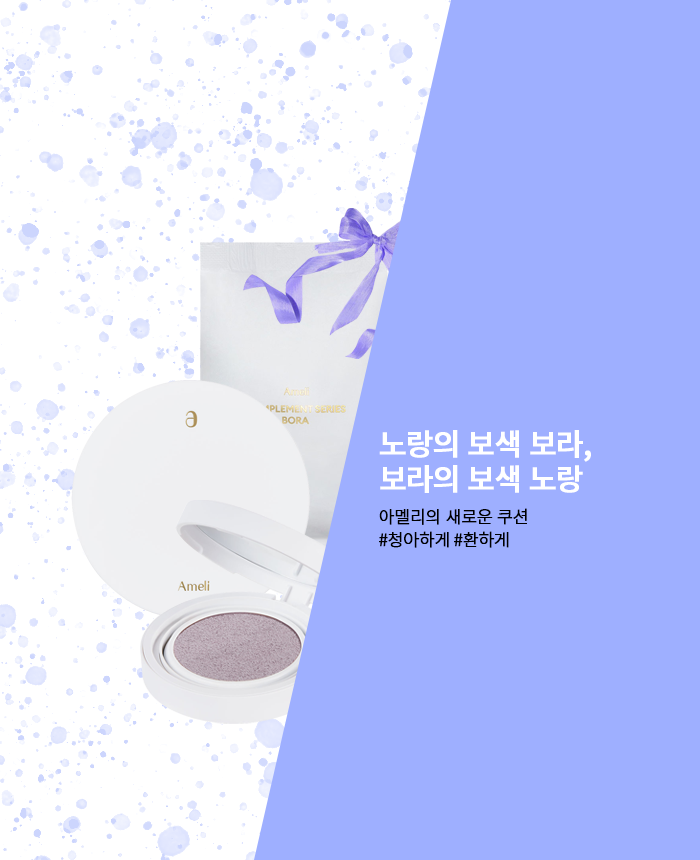
<style>
.page{position:relative;width:700px;height:860px;background:#9eafff}
.page>*{position:absolute;margin:0}
.t1{font:30px/35px "NotoSansKR-Medium";letter-spacing:-0.05em;color:#ffffff;font-weight:bold}
.t2{font:17px/23px "NotoSansKR-Light";letter-spacing:-0.03em;color:#000000;font-weight:bold}
</style>
<div class="page">
<p class="t1" style="left:379px;top:430px;width:212px;height:63px">노랑의 보색 보라,<br>보라의 보색 노랑</p>
<p class="t2" style="left:379px;top:508px;width:148px;height:40px">아멜리의 새로운 쿠션<br>#청아하게 #환하게</p>
</div>
